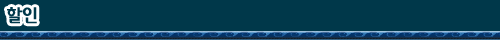
<style>
.page{position:relative;width:500px;height:40px;background:#00384a}
.page>*{position:absolute;margin:0}
.t1{font:19px "2002L";letter-spacing:-0.025em;color:#00384a}
</style>
<div class="page">
<p class="t1" style="left:7px;top:7px;width:30px;height:17px">할인</p>
</div>
